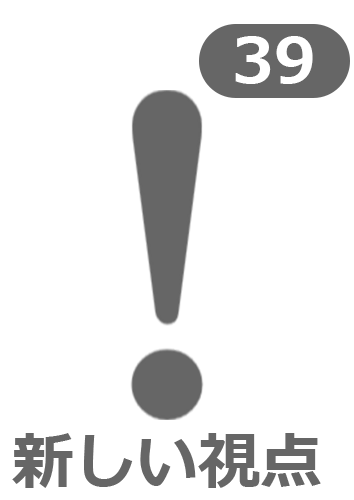
<style>
.page{position:relative;width:354px;height:500px;background:#ffffff}
.page>*{position:absolute;margin:0}
.t1{font:62.1px "Meiryo-Bold";color:#ffffff}
.t2{font:62.1px "Meiryo-Bold";color:#666666}
</style>
<div class="page">
<p class="t1" style="left:235px;top:36px;width:78px;height:48px">39</p>
<p class="t2" style="left:12px;top:433px;width:309px;height:55px">新しい視点</p>
</div>
